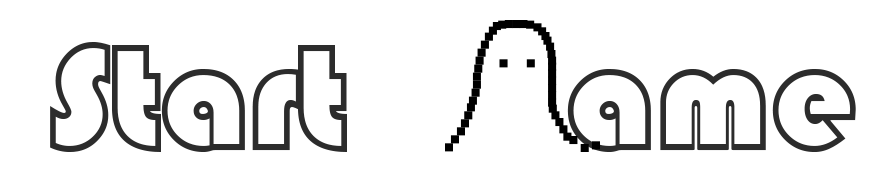
<style>
.page{position:relative;width:890px;height:176px;background:#ffffff}
.page>*{position:absolute;margin:0}
.t1{font:150px "STCaiyun";color:#2c2c2c}
</style>
<div class="page">
<p class="t1" style="left:50px;top:42px;width:806px;height:110px">Start      ame</p>
</div>
